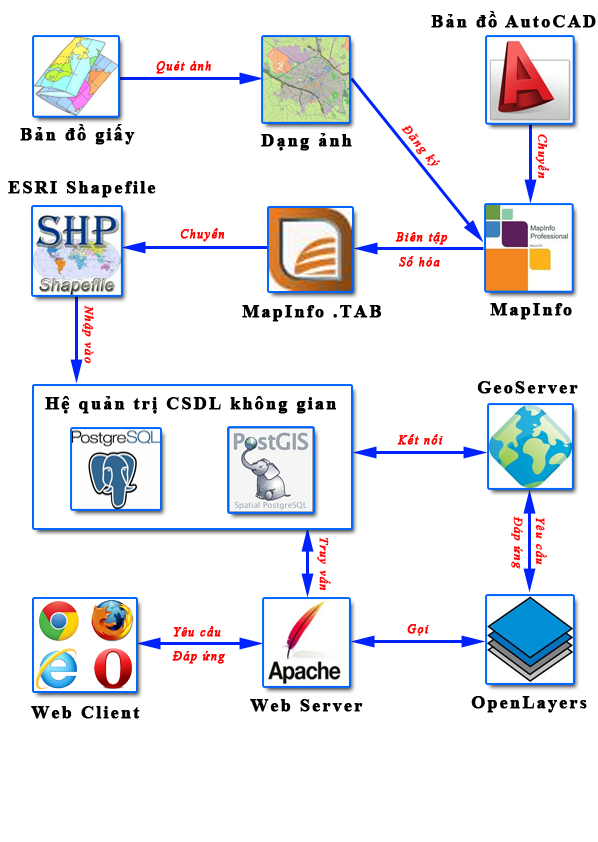
<style>
.page{position:relative;width:598px;height:842px;background:#ffffff}
.page>*{position:absolute;margin:0}
.t1{font:18px "TimesNewRomanPS-BoldMT";letter-spacing:0.1em;color:#000000;font-weight:bold}
.t2{font:12px "TimesNewRomanPS-ItalicMT";letter-spacing:0.1em;color:#ff0000;font-weight:bold}
</style>
<div class="page">
<p class="t1" style="left:431px;top:11px;width:165px;height:17px">Bản đồ AutoCAD</p>
<p class="t2" style="left:156px;top:61px;width:55px;height:13px">Quét ảnh</p>
<p class="t1" style="left:20px;top:124px;width:115px;height:21px">Bản đồ giấy</p>
<p class="t2" style="left:401px;top:125px;width:40px;height:41px;rotate:50deg">Đăng ký</p>
<p class="t1" style="left:261px;top:133px;width:91px;height:18px">Dạng ảnh</p>
<p class="t2" style="left:535px;top:134px;width:15px;height:45px;rotate:90deg">Chuyển</p>
<p class="t1" style="left:8px;top:181px;width:148px;height:17px">ESRI Shapefile</p>
<p class="t2" style="left:180px;top:228px;width:45px;height:14px">Chuyển</p>
<p class="t2" style="left:395px;top:232px;width:53px;height:13px">Biên tập</p>
<p class="t2" style="left:399px;top:256px;width:41px;height:11px">Số hóa</p>
<p class="t2" style="left:82px;top:305px;width:12px;height:59px;rotate:90deg">Nhập vào</p>
<p class="t1" style="left:242px;top:305px;width:139px;height:17px">MapInfo .TAB</p>
<p class="t1" style="left:490px;top:303px;width:82px;height:17px">MapInfo</p>
<p class="t1" style="left:477px;top:381px;width:101px;height:13px">GeoServer</p>
<p class="t1" style="left:45px;top:396px;width:291px;height:18px">Hệ quản trị CSDL không gian</p>
<p class="t2" style="left:397px;top:434px;width:46px;height:11px">Kết nối</p>
<p class="t2" style="left:511px;top:516px;width:12px;height:53px;rotate:90deg">Đáp ứng</p>
<p class="t2" style="left:535px;top:517px;width:12px;height:48px;rotate:90deg">Yêu cầu</p>
<p class="t2" style="left:317px;top:537px;width:14px;height:54px;rotate:90deg">Truy vấn</p>
<p class="t2" style="left:173px;top:626px;width:48px;height:11px">Yêu cầu</p>
<p class="t2" style="left:407px;top:624px;width:22px;height:12px">Gọi</p>
<p class="t2" style="left:172px;top:651px;width:53px;height:13px">Đáp ứng</p>
<p class="t1" style="left:250px;top:699px;width:113px;height:13px">Web Server</p>
<p class="t1" style="left:471px;top:696px;width:116px;height:17px">OpenLayers</p>
<p class="t1" style="left:31px;top:706px;width:109px;height:13px">Web Client</p>
</div>
